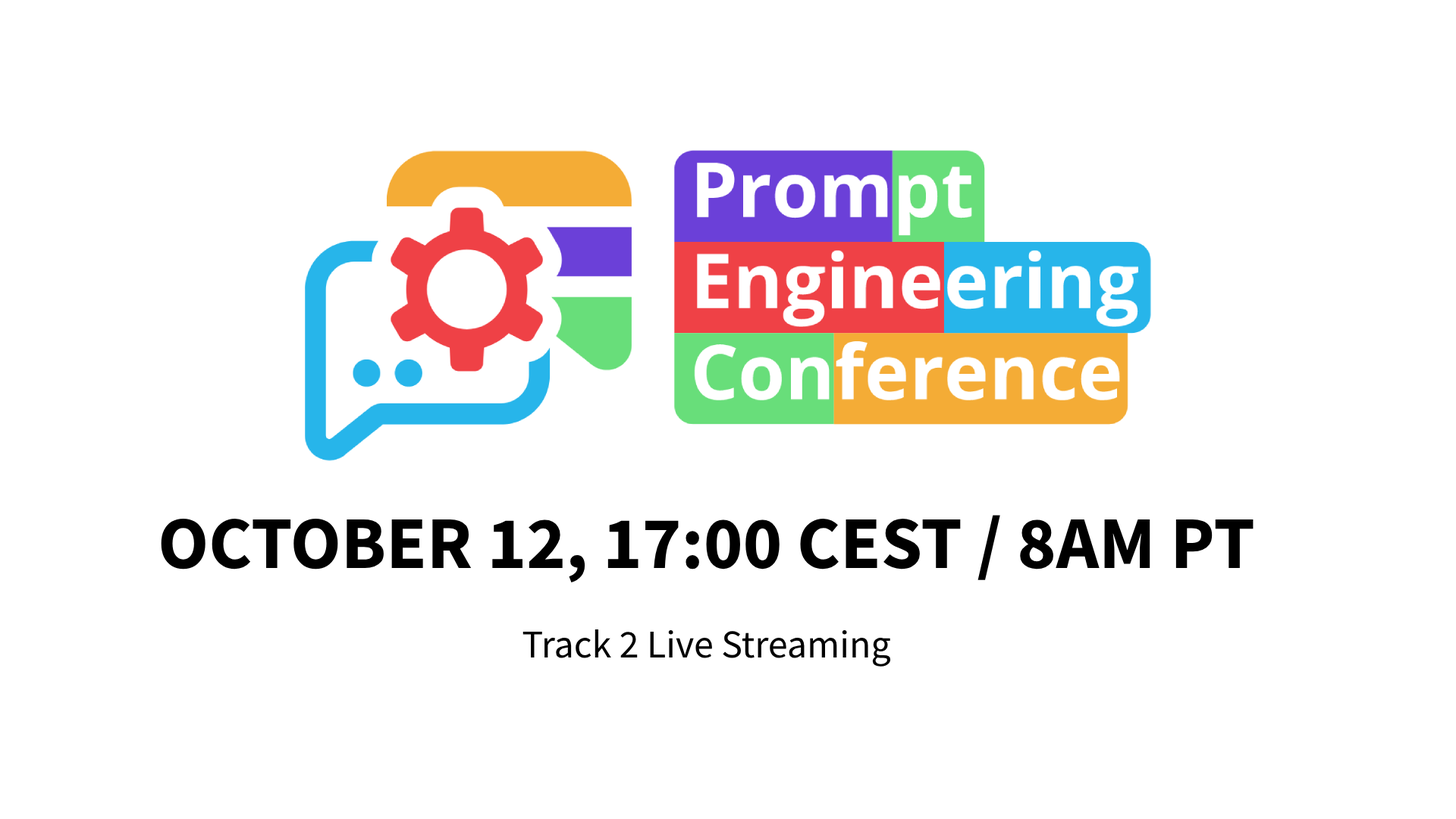
<style>
.page{position:relative;width:1456px;height:819px;background:#ffffff}
.page>*{position:absolute;margin:0}
.t1{font:74.3px "SourceSansPro-Bold";color:#000000}
.t2{font:39.4px "SourceSansPro-Regular";color:#000000}
</style>
<div class="page">
<p class="t1" style="left:161px;top:515px;width:1093px;height:68px">OCTOBER 12, 17:00 CEST / 8AM PT</p>
<p class="t2" style="left:522px;top:629px;width:369px;height:38px">Track 2 Live Streaming</p>
</div>
